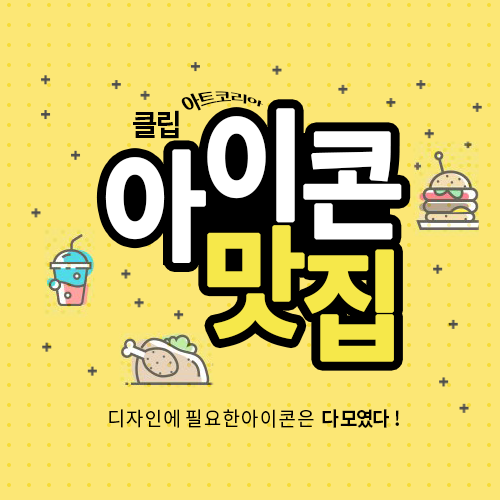
<style>
.page{position:relative;width:500px;height:500px;background:#fce775}
.page>*{position:absolute;margin:0}
.t1{font:15px "NotoSansKR-Bold";letter-spacing:-0.08em;color:#000000;scale:0.95 1}
.t2{font:120px/100px "NotoSansKR-Bold";letter-spacing:-0.08em;color:#ffffff;font-weight:bold;scale:0.95 1}
.t3{font:120px/100px "NotoSansKR-Bold";letter-spacing:-0.08em;color:#f6e84a;font-weight:bold;scale:0.95 1}
.t4{font:30px "NotoSansKR-Bold";letter-spacing:-0.08em;color:#000000;scale:0.95 1}
.t5{font:20px "NotoSansKR-Regular";letter-spacing:-0.08em;color:#000000;scale:0.95 1}
.t6{font:20px "NotoSansKR-Bold";letter-spacing:-0.08em;color:#000000;scale:0.95 1}
</style>
<div class="page">
<p class="t1" style="left:181px;top:91px;width:82px;height:20px;rotate:-7deg">아트코리아</p>
<p class="t2" style="left:105px;top:108px;width:297px;height:254px">아이콘<br>     <span class="t3">맛집</span></p>
<p class="t4" style="left:133px;top:110px;width:46px;height:29px">클립</p>
<p class="t5" style="left:109px;top:409px;width:290px;height:19px">디 자 인 에  필 요 한 아 이 콘 은   <span class="t6">다 모였다  !</span></p>
</div>
